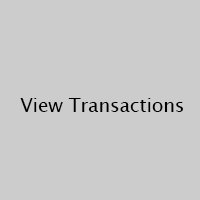
<style>
.page{position:relative;width:200px;height:200px;background:#cccccc}
.page>*{position:absolute;margin:0}
.t1{font:18.7px "LucidaSansUnicode";color:#000000}
</style>
<div class="page">
<p class="t1" style="left:20px;top:98px;width:163px;height:14px">View Transactions</p>
</div>
